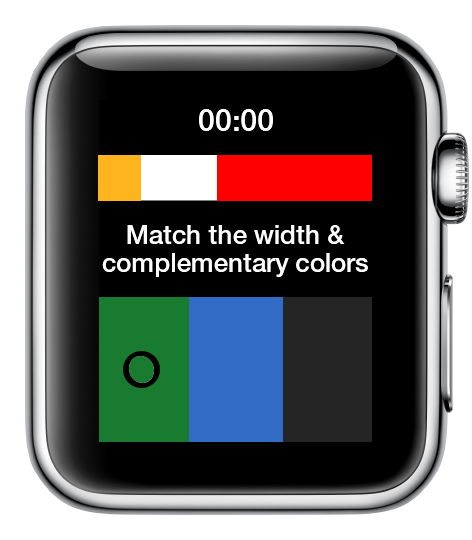
<style>
.page{position:relative;width:472px;height:540px;background:#000000}
.page>*{position:absolute;margin:0}
.t1{font:30px "HelveticaNeue-Medium";letter-spacing:0.004em;color:#ffffff}
.t2{font:26px/28px "HelveticaNeue-Medium";letter-spacing:0.004em;color:#ffffff}
</style>
<div class="page">
<p class="t1" style="left:199px;top:109px;width:74px;height:22px">00:00</p>
<p class="t2" style="left:102px;top:225px;width:266px;height:52px;text-align:center">Match the width &amp;<br>complementary colors</p>
</div>
